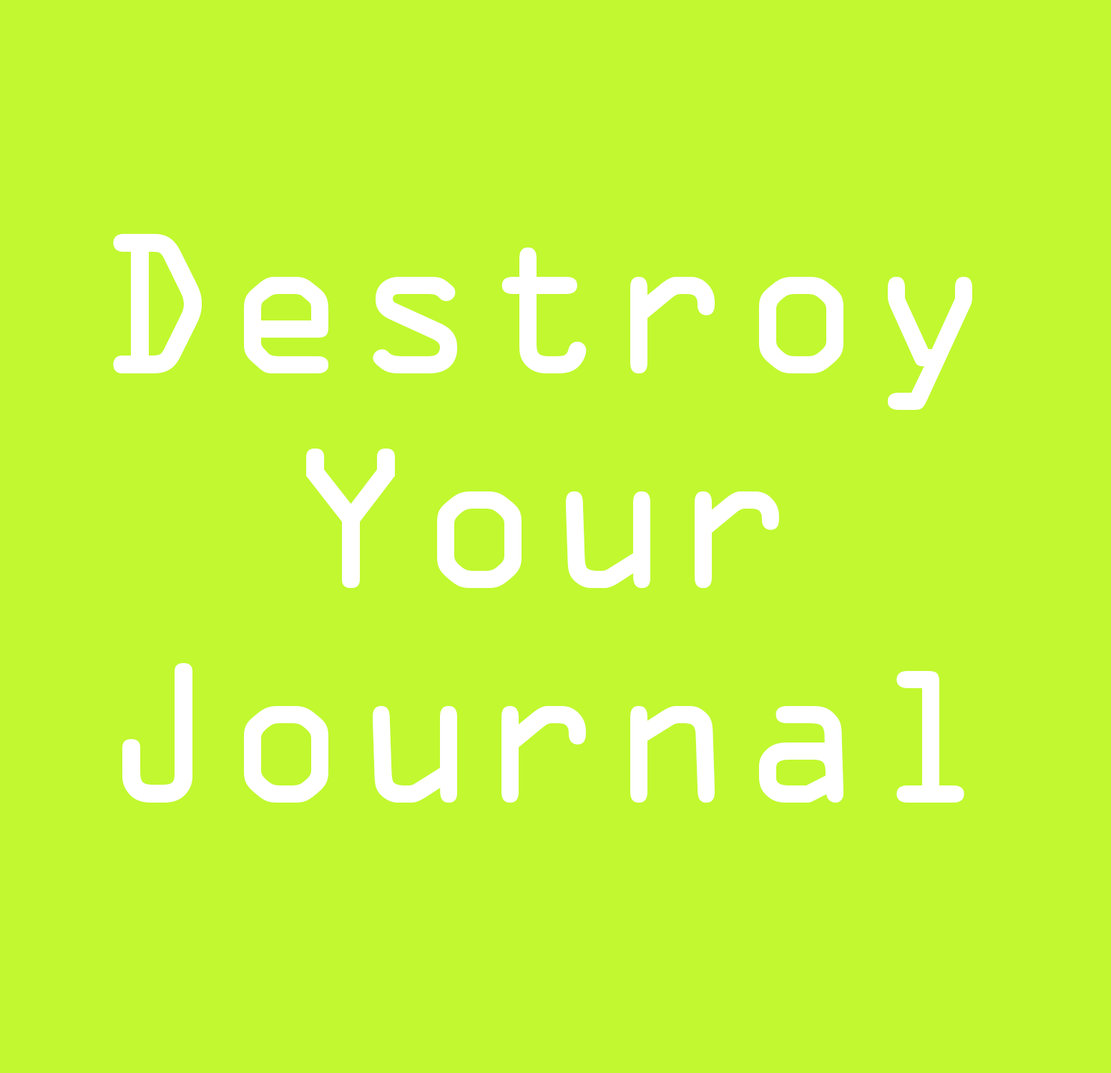
<style>
.page{position:relative;width:1111px;height:1073px;background:#c2f82f}
.page>*{position:absolute;margin:0}
.t1{font:178.9px "OCRAStd";color:#ffffff}
</style>
<div class="page">
<p class="t1" style="left:113px;top:234px;width:859px;height:569px;text-align:center">Destroy<br>Your<br>Journal</p>
</div>
